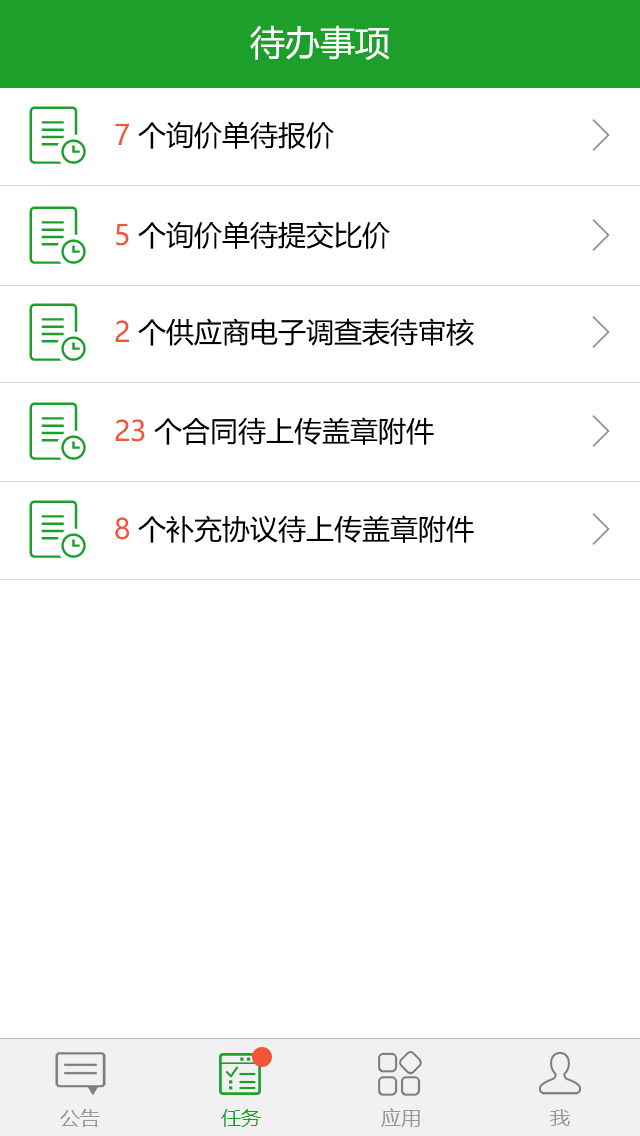
<style>
.page{position:relative;width:640px;height:1136px;background:#ffffff}
.page>*{position:absolute;margin:0}
.t1{font:35px "MicrosoftYaHei";color:#ffffff}
.t2{font:28px "MicrosoftYaHei";color:#000000}
.t3{font:28px "MicrosoftYaHei";color:#f45438}
.t4{font:20px "MicrosoftYaHei";color:#979798}
.t5{font:20px "MicrosoftYaHei";color:#1da02b}
</style>
<div class="page">
<p class="t1" style="left:250px;top:25px;width:140px;height:35px">待办事项</p>
<p class="t2" style="left:115px;top:121px;width:219px;height:28px"><span class="t3">7 </span>个询价单待报价</p>
<p class="t2" style="left:116px;top:221px;width:274px;height:28px"><span class="t3">5 </span>个询价单待提交比价</p>
<p class="t2" style="left:115px;top:318px;width:359px;height:28px"><span class="t3">2 </span>个供应商电子调查表待审核</p>
<p class="t2" style="left:115px;top:417px;width:319px;height:28px"><span class="t3">23 </span>个合同待上传盖章附件</p>
<p class="t2" style="left:115px;top:515px;width:359px;height:28px"><span class="t3">8 </span>个补充协议待上传盖章附件</p>
<p class="t4" style="left:60px;top:1109px;width:40px;height:18px">公告</p>
<p class="t5" style="left:221px;top:1109px;width:40px;height:18px">任务</p>
<p class="t4" style="left:381px;top:1108px;width:39px;height:19px">应用</p>
<p class="t4" style="left:550px;top:1109px;width:20px;height:17px">我</p>
</div>
